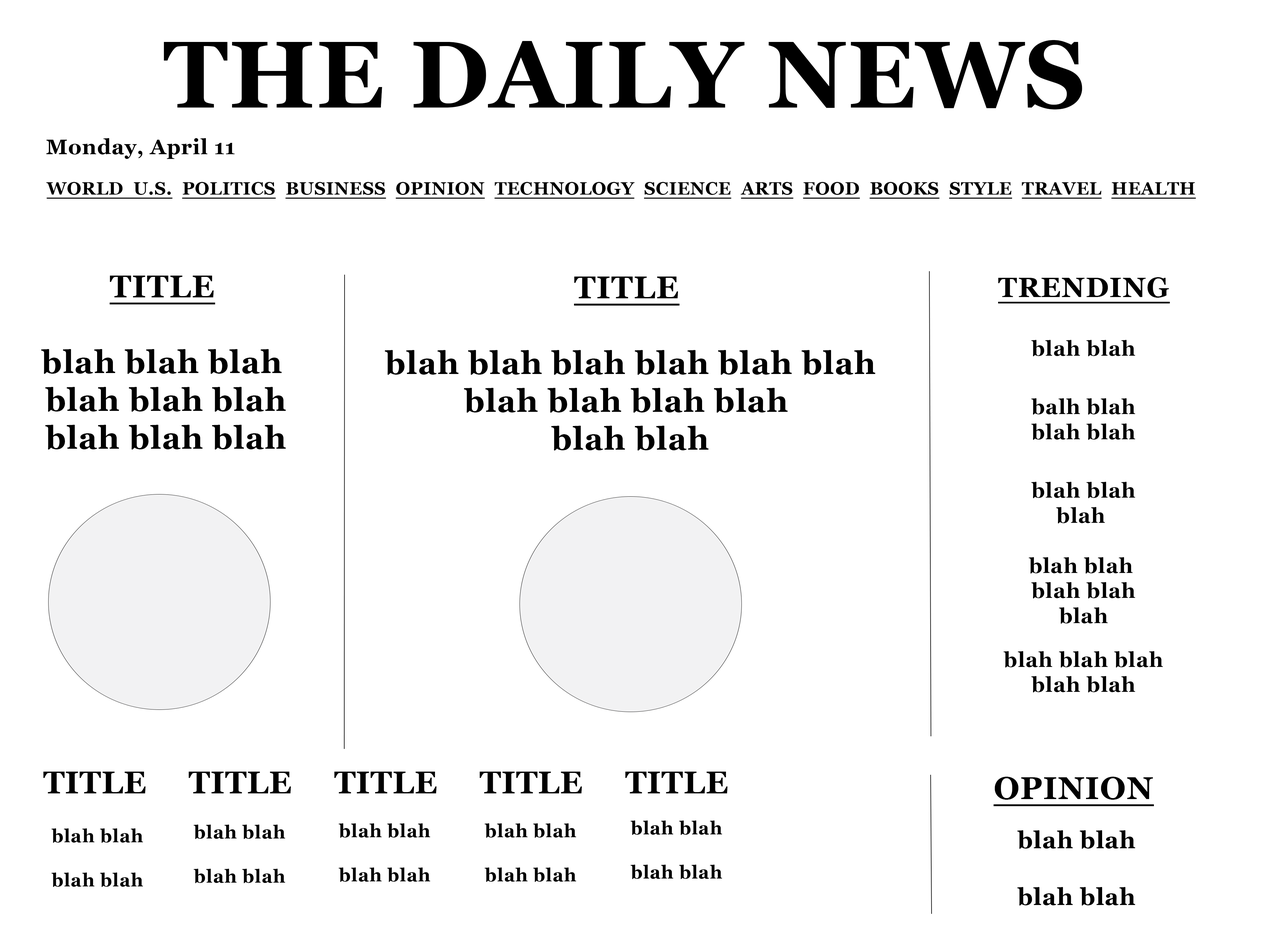
<style>
.page{position:relative;width:1261px;height:946px;background:#ffffff}
.page>*{position:absolute;margin:0}
.t1{font:94.6px "Georgia-Bold";letter-spacing:0.025em;color:#000000}
.t2{font:21px "Georgia-Bold";letter-spacing:0.025em;color:#000000}
.t3{font:17.5px "Georgia-Bold";letter-spacing:0.025em;color:#000000;text-decoration:underline}
.t4{font:31.5px "Georgia-Bold";letter-spacing:0.025em;color:#000000}
.t5{font:31.5px "Georgia-Bold";letter-spacing:0.025em;color:#000000;text-decoration:underline}
.t6{font:20.9px "Georgia-Bold";letter-spacing:0.025em;color:#000000}
.t7{font:27.8px "Georgia-Bold";letter-spacing:0.025em;color:#000000;text-decoration:underline}
.t8{font:18.4px "Georgia-Bold";letter-spacing:0.025em;color:#000000}
.t9{font:23.6px "Georgia-Bold";letter-spacing:0.025em;color:#000000}
</style>
<div class="page">
<p class="t1" style="left:164px;top:40px;width:918px;height:69px">THE DAILY NEWS</p>
<p class="t2" style="left:46px;top:138px;width:189px;height:21px">Monday, April 11</p>
<p class="t3" style="left:46px;top:182px;width:1150px;height:17px">WORLD  U.S.  POLITICS  BUSINESS  OPINION  TECHNOLOGY  SCIENCE  ARTS  FOOD  BOOKS  STYLE  TRAVEL  HEALTH</p>
<p class="t4" style="left:41px;top:276px;width:245px;height:174px;text-align:center"><span class="t5">TITLE</span> <br><br>blah blah blah <br>blah blah blah<br>blah blah blah</p>
<p class="t4" style="left:385px;top:276px;width:490px;height:174px;text-align:center"><span class="t5">TITLE</span> <br><br>blah blah blah blah blah blah<br>blah blah blah blah <br>blah blah</p>
<p class="t6" style="left:998px;top:277px;width:172px;height:415px;text-align:center"><span class="t7">TRENDING<br><br></span>blah blah<br><br>balh blah<br>blah blah<br><br>blah blah<br>blah <br><br>blah blah <br>blah blah<br>blah<br><br>blah blah blah<br>blah blah</p>
<p class="t4" style="left:43px;top:771px;width:685px;height:22px">TITLE     TITLE     TITLE     TITLE     TITLE</p>
<p class="t5" style="left:993px;top:776px;width:161px;height:30px">OPINION</p>
<p class="t8" style="left:630px;top:820px;width:92px;height:59px;text-align:center">blah blah<br><br>blah blah</p>
<p class="t8" style="left:51px;top:828px;width:92px;height:59px;text-align:center">blah blah<br><br>blah blah</p>
<p class="t8" style="left:194px;top:824px;width:91px;height:59px;text-align:center">blah blah<br><br>blah blah</p>
<p class="t8" style="left:339px;top:823px;width:91px;height:59px;text-align:center">blah blah<br><br>blah blah</p>
<p class="t8" style="left:485px;top:823px;width:91px;height:59px;text-align:center">blah blah<br><br>blah blah</p>
<p class="t9" style="left:1017px;top:830px;width:118px;height:75px;text-align:center">blah blah<br><br>blah blah</p>
</div>
